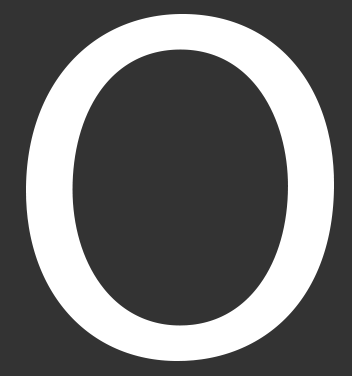
<style>
.page{position:relative;width:352px;height:376px;background:#333333}
.page>*{position:absolute;margin:0}
.t1{font:500px "MyriadPro-Regular";color:#ffffff}
</style>
<div class="page">
<p class="t1" style="left:26px;top:14px;width:308px;height:347px">O</p>
</div>
